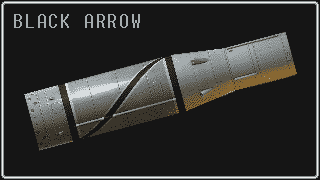
<style>
.page{position:relative;width:320px;height:180px;background:#151515}
.page>*{position:absolute;margin:0}
.t1{font:18px "Terminal";letter-spacing:0.1em;color:#a5acae}
</style>
<div class="page">
<p class="t1" style="left:14px;top:14px;width:126px;height:14px">BLACK ARROW</p>
</div>
